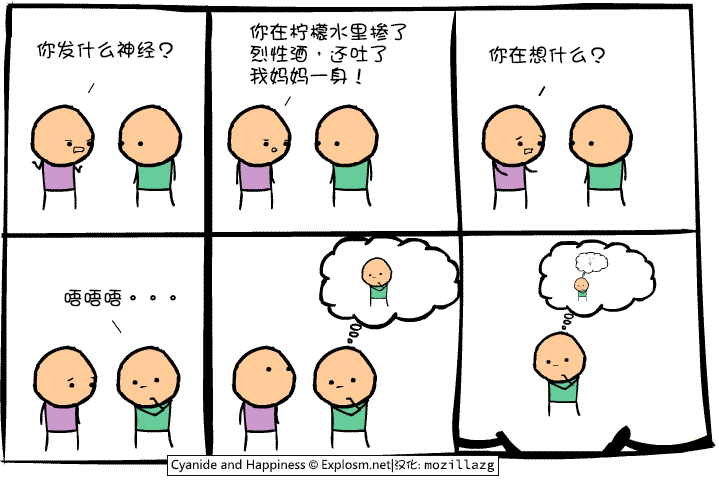
<style>
.page{position:relative;width:719px;height:485px;background:#ffffff}
.page>*{position:absolute;margin:0}
.t1{font:20px/22px "DFGirl";color:#000000}
.t2{font:20px "DFGirl";color:#000000}
</style>
<div class="page">
<p class="t1" style="left:249px;top:22px;width:158px;height:63px">你在柠檬水里掺了<br>烈性酒，还吐了<br>我妈妈一身！</p>
<p class="t2" style="left:36px;top:40px;width:137px;height:19px">你发什么神经？</p>
<p class="t2" style="left:488px;top:45px;width:117px;height:19px">你在想什么？</p>
<p class="t2" style="left:64px;top:289px;width:112px;height:18px">唔唔唔。。。</p>
</div>
